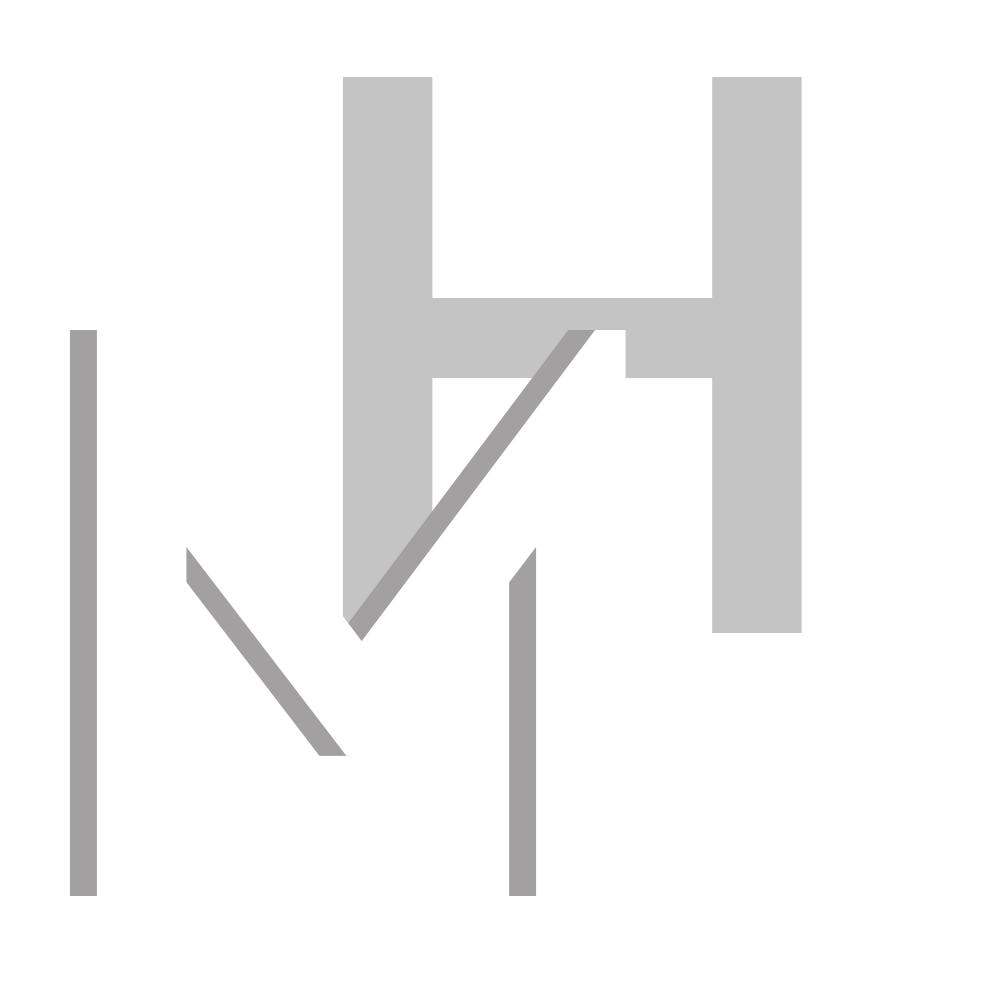
<style>
.page{position:relative;width:1000px;height:1000px;background:#ffffff}
.page>*{position:absolute;margin:0}
.t1{font:843.4px "CeraPROModern-Medium";color:#c4c4c4}
.t2{font:843.4px "CeraPROModern-Medium"}
.t3{font:843.4px "CeraPROModern-Medium";color:#ffffff}
</style>
<div class="page">
<p class="t1" style="left:342px;top:77px;width:460px;height:556px">Hv</p>
<p class="t2" style="left:369px;top:77px;width:460px;height:556px">Hv</p>
<p class="t3" style="left:96px;top:330px;width:530px;height:566px">M</p>
</div>
